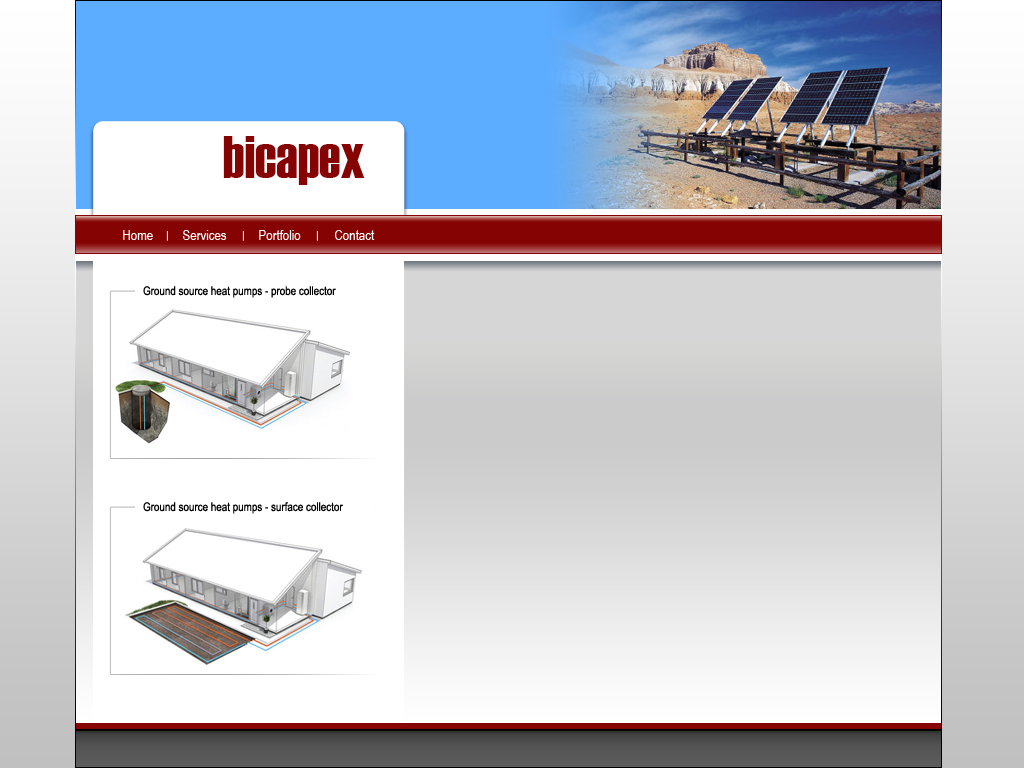
<style>
.page{position:relative;width:1024px;height:768px}
.page>*{position:absolute;margin:0}
.t1{font:60px "Haettenschweiler";color:#860303}
.t2{font:14px "ArialNarrow";color:#ffffff}
.t3{font:12px "ArialNarrow";color:#000000}
</style>
<div class="page">
<p class="t1" style="left:223px;top:136px;width:142px;height:49px">bicapex</p>
<p class="t2" style="left:123px;top:230px;width:30px;height:10px">Home</p>
<p class="t2" style="left:182px;top:230px;width:45px;height:10px">Services</p>
<p class="t2" style="left:259px;top:230px;width:42px;height:10px">Portfolio</p>
<p class="t2" style="left:335px;top:230px;width:40px;height:10px">Contact</p>
<p class="t3" style="left:143px;top:286px;width:193px;height:12px">Ground source heat pumps - probe collector</p>
<p class="t3" style="left:143px;top:502px;width:200px;height:12px">Ground source heat pumps - surface collector</p>
</div>
